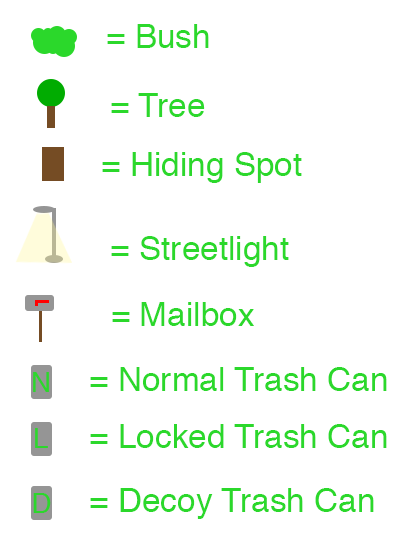
<style>
.page{position:relative;width:402px;height:535px;background:#ffffff}
.page>*{position:absolute;margin:0}
.t1{font:33.3px "Helvetica";color:#2bd82b}
.t2{font:12px "Helvetica";color:#2bd82b}
</style>
<div class="page">
<p class="t1" style="left:107px;top:24px;width:102px;height:24px">= Bush</p>
<p class="t2" style="left:111px;top:93px;width:94px;height:24px">= Tree</p>
<p class="t2" style="left:102px;top:152px;width:200px;height:31px">= Hiding Spot</p>
<p class="t2" style="left:111px;top:236px;width:178px;height:31px">= Streetlight</p>
<p class="t2" style="left:112px;top:302px;width:142px;height:24px">= Mailbox</p>
<p class="t2" style="left:90px;top:367px;width:297px;height:24px">= Normal Trash Can</p>
<p class="t2" style="left:90px;top:424px;width:297px;height:24px">= Locked Trash Can</p>
<p class="t2" style="left:90px;top:488px;width:284px;height:31px">= Decoy Trash Can</p>
</div>
